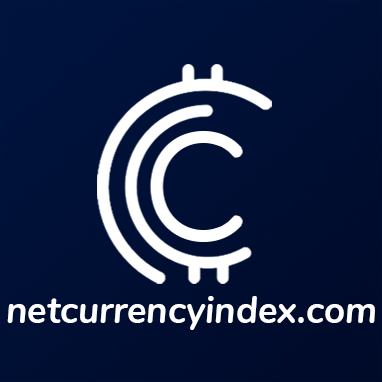
<style>
.page{position:relative;width:382px;height:382px}
.page>*{position:absolute;margin:0}
.t1{font:38.1px "Nunito-BoldItalic";color:#ffffff;scale:0.96 1}
</style>
<div class="page">
<p class="t1" style="left:7px;top:296px;width:368px;height:34px">netcurrencyindex.com</p>
</div>
